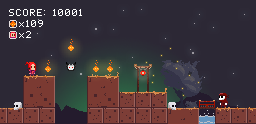
<style>
.page{position:relative;width:256px;height:124px;background:#2c2835}
.page>*{position:absolute;margin:0}
.t1{font:8px "pixelmix";letter-spacing:0.12em;color:#ffffff}
</style>
<div class="page">
<p class="t1" style="left:9px;top:9px;width:73px;height:7px">SCORE: 10001</p>
<p class="t1" style="left:19px;top:20px;width:24px;height:7px">x109</p>
<p class="t1" style="left:19px;top:31px;width:12px;height:7px">x2</p>
</div>
